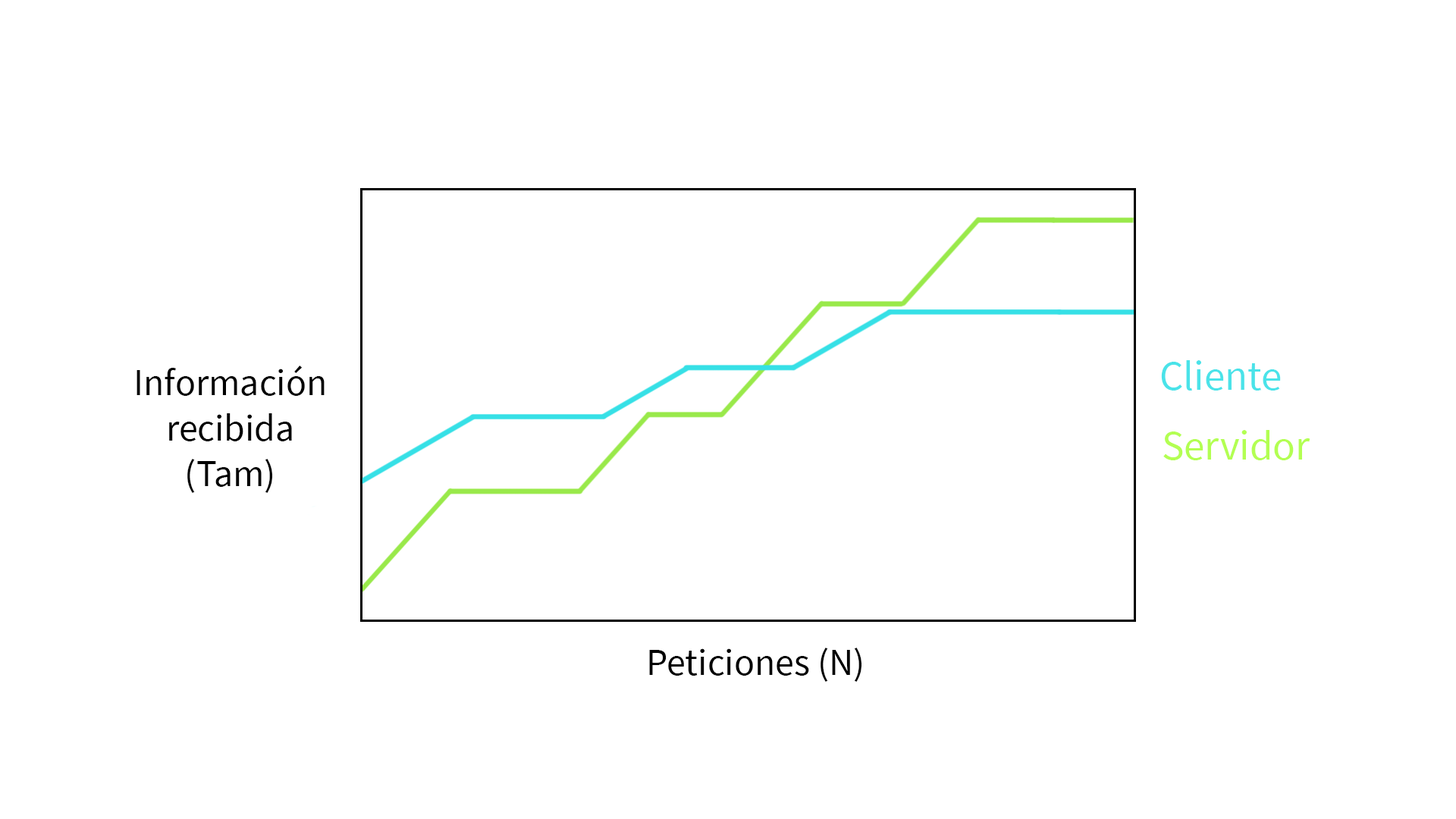
<style>
.page{position:relative;width:1456px;height:819px;background:#ffffff}
.page>*{position:absolute;margin:0}
.t1{font:37.9px "SourceSansPro-Regular";color:#000000}
.t2{font:41.7px "SourceSansPro-Regular";color:#4ae3e9}
.t3{font:41.7px "SourceSansPro-Regular";color:#b3ff52}
</style>
<div class="page">
<p class="t1" style="left:136px;top:366px;width:189px;height:127px;text-align:center">Información<br>recibida<br>(Tam)</p>
<p class="t2" style="left:1161px;top:360px;width:120px;height:31px">Cliente</p>
<p class="t3" style="left:1163px;top:430px;width:147px;height:30px">Servidor</p>
<p class="t1" style="left:649px;top:648px;width:212px;height:34px">Peticiones (N)</p>
</div>
